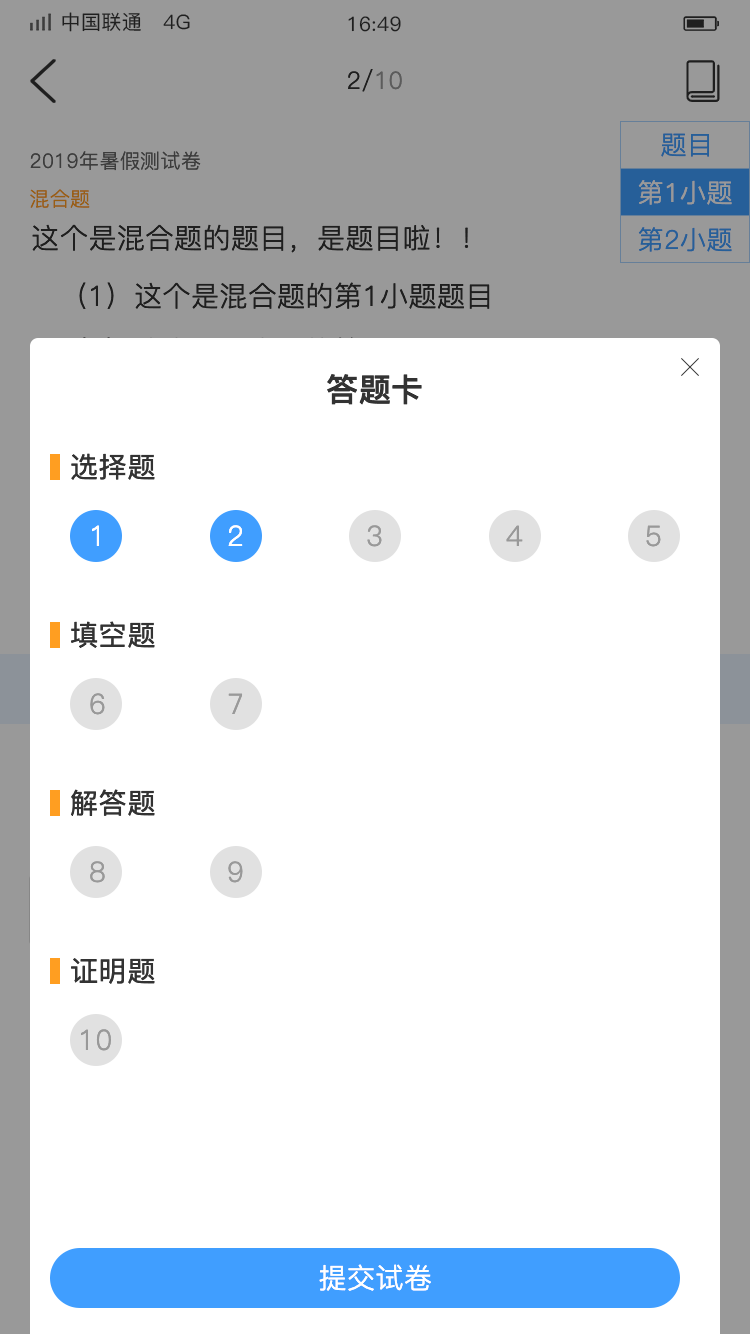
<style>
.page{position:relative;width:750px;height:1334px;background:#ffffff}
.page>*{position:absolute;margin:0}
.t1{font:20px "PingFang-SC-Medium";letter-spacing:0.02em;color:#333333}
.t2{font:24px "PingFang-SC-Regular";letter-spacing:0.02em}
.t3{font:26px "PingFang-SC-Regular";letter-spacing:0.02em;color:#265f99}
.t4{font:20px "PingFang-SC-Regular";letter-spacing:0.02em;color:#3d3d3d}
.t5{font:26px "PingFang-SC-Regular";letter-spacing:0.02em;color:#999999}
.t6{font:20px "PingFang-SC-Regular";letter-spacing:0.02em;color:#995f14}
.t7{font:28px "PingFang-SC-Regular";letter-spacing:0.02em;color:#333333}
.t8{font:32px "PingFang-SC-Bold";letter-spacing:0.02em;color:#333333}
.t9{font:28px "PingFang-SC-Medium";letter-spacing:0.02em;color:#333333}
.t10{font:28px "PingFang-SC-Regular";letter-spacing:0.02em;color:#ffffff}
.t11{font:28px "PingFang-SC-Regular";letter-spacing:0.02em;color:#999999}
</style>
<div class="page">
<p class="t1" style="left:62px;top:12px;width:128px;height:20px">中国联通   4G</p>
<p class="t1" style="left:348px;top:16px;width:53px;height:16px">16:49</p>
<p class="t2" style="left:348px;top:69px;width:54px;height:23px">2/10</p>
<p class="t3" style="left:661px;top:133px;width:48px;height:24px">题目</p>
<p class="t4" style="left:30px;top:151px;width:171px;height:20px">2019年暑假测试卷</p>
<p class="t5" style="left:638px;top:180px;width:94px;height:25px">第1小题</p>
<p class="t6" style="left:30px;top:189px;width:60px;height:19px">混合题</p>
<p class="t7" style="left:32px;top:224px;width:437px;height:29px">这个是混合题的题目，是题目啦！！</p>
<p class="t3" style="left:638px;top:227px;width:94px;height:25px">第2小题</p>
<p class="t7" style="left:79px;top:282px;width:411px;height:27px">（1）这个是混合题的第1小题题目</p>
<p class="t8" style="left:327px;top:374px;width:95px;height:31px">答题卡</p>
<p class="t9" style="left:71px;top:453px;width:84px;height:27px">选择题</p>
<p class="t10" style="left:92px;top:525px;width:7px;height:21px">1</p>
<p class="t10" style="left:228px;top:525px;width:15px;height:21px">2</p>
<p class="t11" style="left:367px;top:525px;width:15px;height:22px">3</p>
<p class="t11" style="left:506px;top:525px;width:17px;height:21px">4</p>
<p class="t11" style="left:646px;top:525px;width:15px;height:22px">5</p>
<p class="t9" style="left:71px;top:621px;width:84px;height:27px">填空题</p>
<p class="t11" style="left:90px;top:693px;width:15px;height:22px">6</p>
<p class="t11" style="left:228px;top:693px;width:15px;height:21px">7</p>
<p class="t9" style="left:71px;top:789px;width:84px;height:27px">解答题</p>
<p class="t11" style="left:90px;top:861px;width:15px;height:22px">8</p>
<p class="t11" style="left:228px;top:861px;width:15px;height:22px">9</p>
<p class="t9" style="left:71px;top:958px;width:84px;height:26px">证明题</p>
<p class="t11" style="left:81px;top:1029px;width:30px;height:22px">10</p>
<p class="t10" style="left:319px;top:1264px;width:112px;height:27px">提交试卷</p>
</div>
